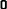
<style>
.page{position:relative;width:7px;height:9px;background:#000000}
.page>*{position:absolute;margin:0}
.t1{font:14px "CourierNewPS-BoldMT";letter-spacing:-0.014em;color:#000000;font-weight:bold}
</style>
<div class="page">
<p class="t1" style="left:0px;top:0px;width:7px;height:10px">0</p>
</div>
